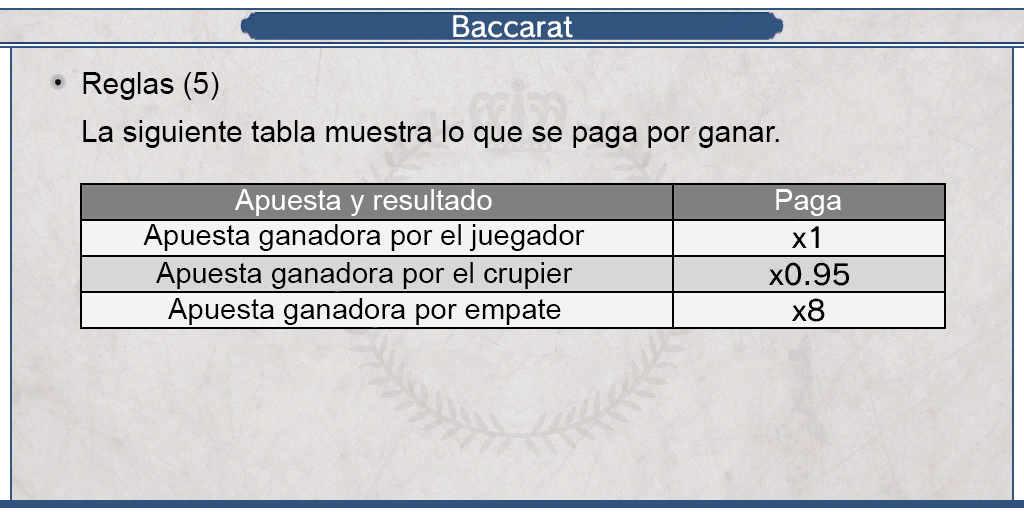
<style>
.page{position:relative;width:1024px;height:512px}
.page>*{position:absolute;margin:0}
.t1{font:29.9px "ArialMT";color:#000000}
.t2{font:29px "ArialMT";color:#ffffff}
.t3{font:29px "ArialMT";color:#000000}
</style>
<div class="page">
<p class="t1" style="left:83px;top:72px;width:136px;height:28px">Reglas (5)</p>
<p class="t1" style="left:83px;top:120px;width:696px;height:28px">La siguiente tabla muestra lo que se paga por ganar.</p>
<p class="t2" style="left:235px;top:189px;width:257px;height:27px">Apuesta y resultado</p>
<p class="t2" style="left:776px;top:189px;width:65px;height:27px">Paga</p>
<p class="t3" style="left:143px;top:224px;width:442px;height:27px">Apuesta ganadora por el juegador</p>
<p class="t3" style="left:156px;top:262px;width:417px;height:27px">Apuesta ganadora por el crupier</p>
<p class="t3" style="left:168px;top:298px;width:393px;height:27px">Apuesta ganadora por empate</p>
</div>
